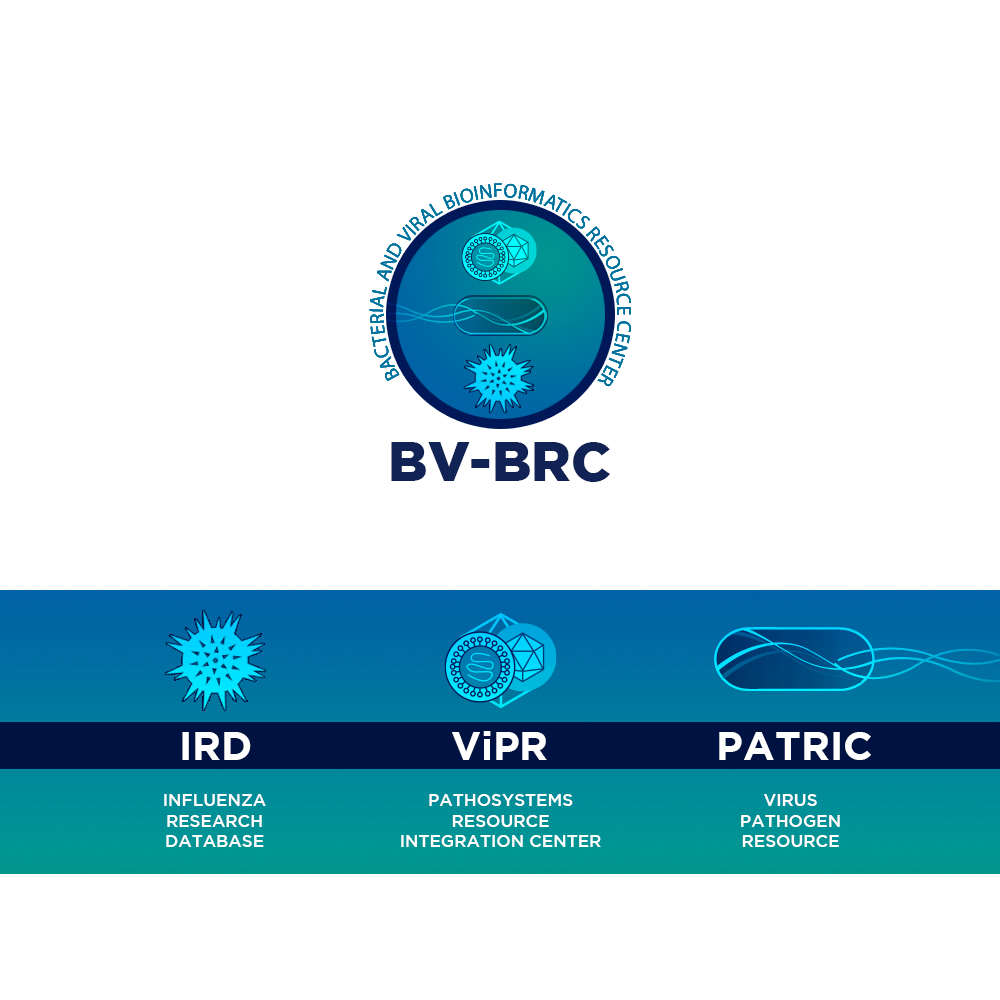
<style>
.page{position:relative;width:1000px;height:1000px;background:#ffffff}
.page>*{position:absolute;margin:0}
.t1{font:55px "GothamBlack";color:#112355}
.t2{font:40px "GothamBold";color:#ffffff}
.t3{font:17px "GothamMedium";color:#ffffff}
.t4{font:17px "GothamMedium";color:#ffffff;text-transform:uppercase}
</style>
<div class="page">
<p class="t1" style="left:391px;top:442px;width:219px;height:40px">BV-BRC</p>
<p class="t2" style="left:182px;top:732px;width:69px;height:28px">IRD</p>
<p class="t2" style="left:452px;top:731px;width:95px;height:29px">ViPR</p>
<p class="t2" style="left:719px;top:732px;width:152px;height:28px">PATRIC</p>
<p class="t3" style="left:164px;top:794px;width:102px;height:53px;text-align:center">INFLUENZA<br>RESEARCH<br>DATABASE</p>
<p class="t4" style="left:401px;top:794px;width:200px;height:53px;text-align:center">Pathosystems<br>Resource<br>Integration Center</p>
<p class="t3" style="left:741px;top:794px;width:99px;height:53px;text-align:center">VIRUS<br>PATHOGEN<br>RESOURCE</p>
</div>
